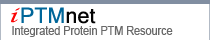
<style>
.page{position:relative;width:210px;height:40px;background:#ffffff}
.page>*{position:absolute;margin:0}
.t1{font:18px "LucidaCalligraphy-Italic";color:#fc0505;font-style:italic;scale:1.2 1}
.t2{font:24px "Vrinda";color:#006699}
.t3{font:34px "LucidaCalligraphy-Italic";color:#006699;font-style:italic}
.t4{font:24px "Vrinda";color:#030303}
.t5{font:12px "ArialMT";color:#696969;scale:0.9 1}
</style>
<div class="page">
<p class="t1" style="left:11px;top:7px;width:9px;height:16px">i</p>
<p class="t2" style="left:21px;top:7px;width:75px;height:17px"><span class="t3"> </span>PTM<span class="t4">net</span></p>
<p class="t5" style="left:12px;top:26px;width:161px;height:11px">Integrated Protein PTM Resource</p>
</div>
